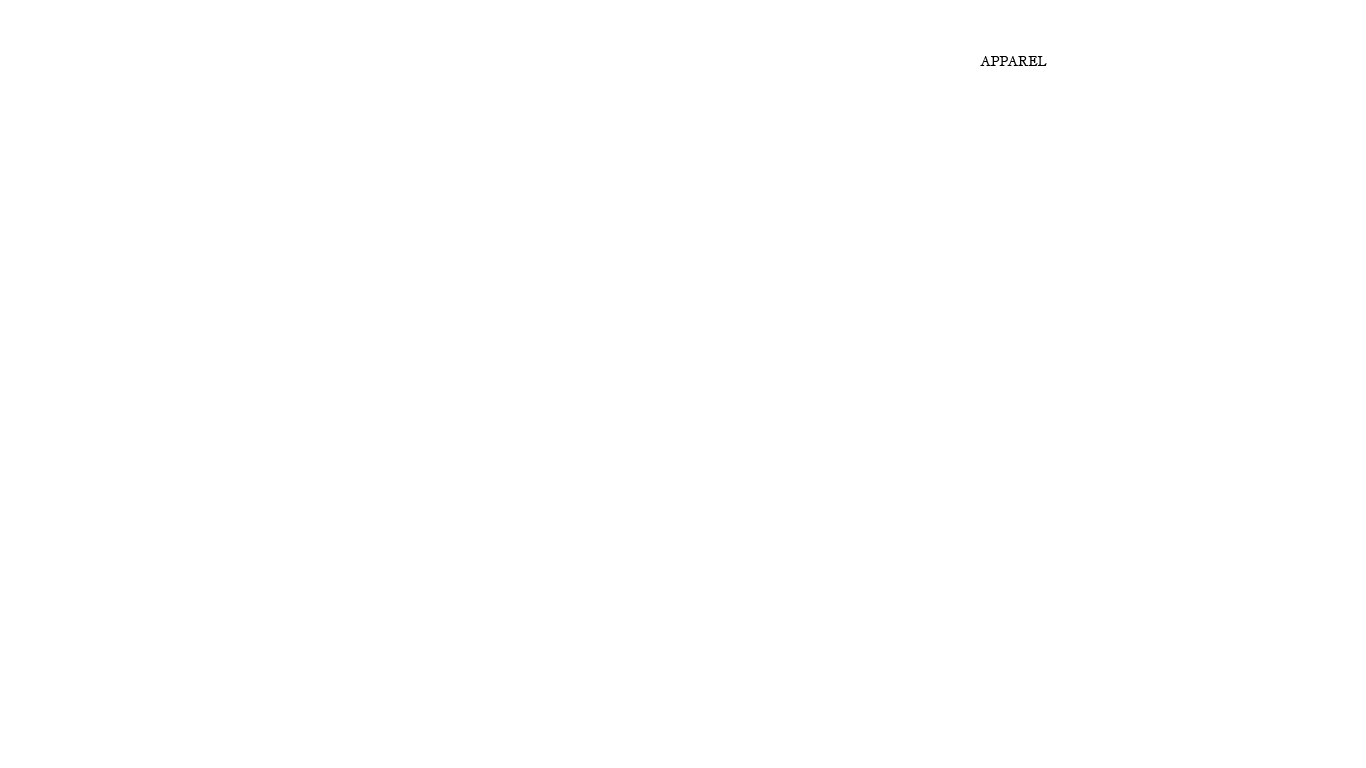
<style>
.page{position:relative;width:1366px;height:768px;background:#ffffff}
.page>*{position:absolute;margin:0}
.t1{font:14px "HoeflerText-Regular";color:#000000}
</style>
<div class="page">
<p class="t1" style="left:980px;top:56px;width:67px;height:10px">APPAREL</p>
</div>
